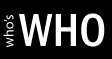
<style>
.page{position:relative;width:112px;height:59px;background:#000000}
.page>*{position:absolute;margin:0}
.t1{font:14px "MyriadPro-Regular";letter-spacing:0.005em;color:#ffffff}
.t2{font:48px "FranklinGothic-MediumCond";letter-spacing:0.005em;color:#ffffff}
</style>
<div class="page">
<p class="t1" style="left:3px;top:15px;width:11px;height:33px;rotate:-90deg">who’s</p>
<p class="t2" style="left:19px;top:13px;width:86px;height:34px">WHO</p>
</div>
